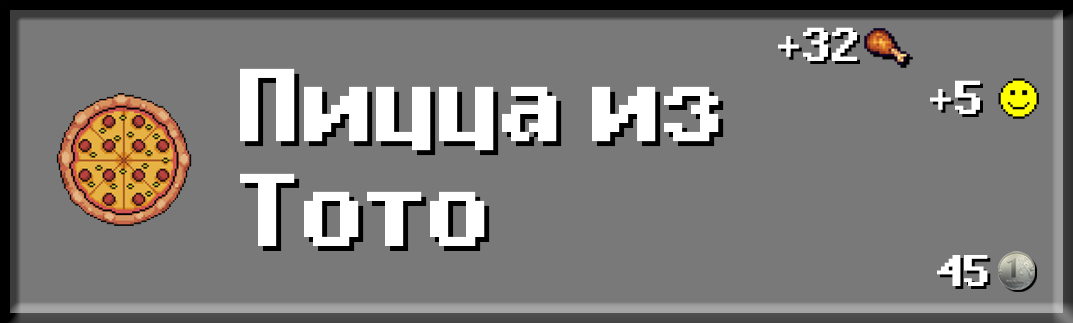
<style>
.page{position:relative;width:1073px;height:323px;background:#797979}
.page>*{position:absolute;margin:0}
.t1{font:54px "EpilepsySansBold";color:#ffffff}
.t2{font:117.2px/104.4px "EpilepsySansBold";color:#ffffff}
.t3{font:50.6px "EpilepsySansBold";color:#ffffff}
</style>
<div class="page">
<p class="t1" style="left:778px;top:27px;width:79px;height:34px">+32</p>
<p class="t2" style="left:240px;top:68px;width:479px;height:178px">Пицца из<br>Тото</p>
<p class="t1" style="left:930px;top:80px;width:50px;height:34px">+5</p>
<p class="t3" style="left:937px;top:255px;width:51px;height:31px">45</p>
</div>
